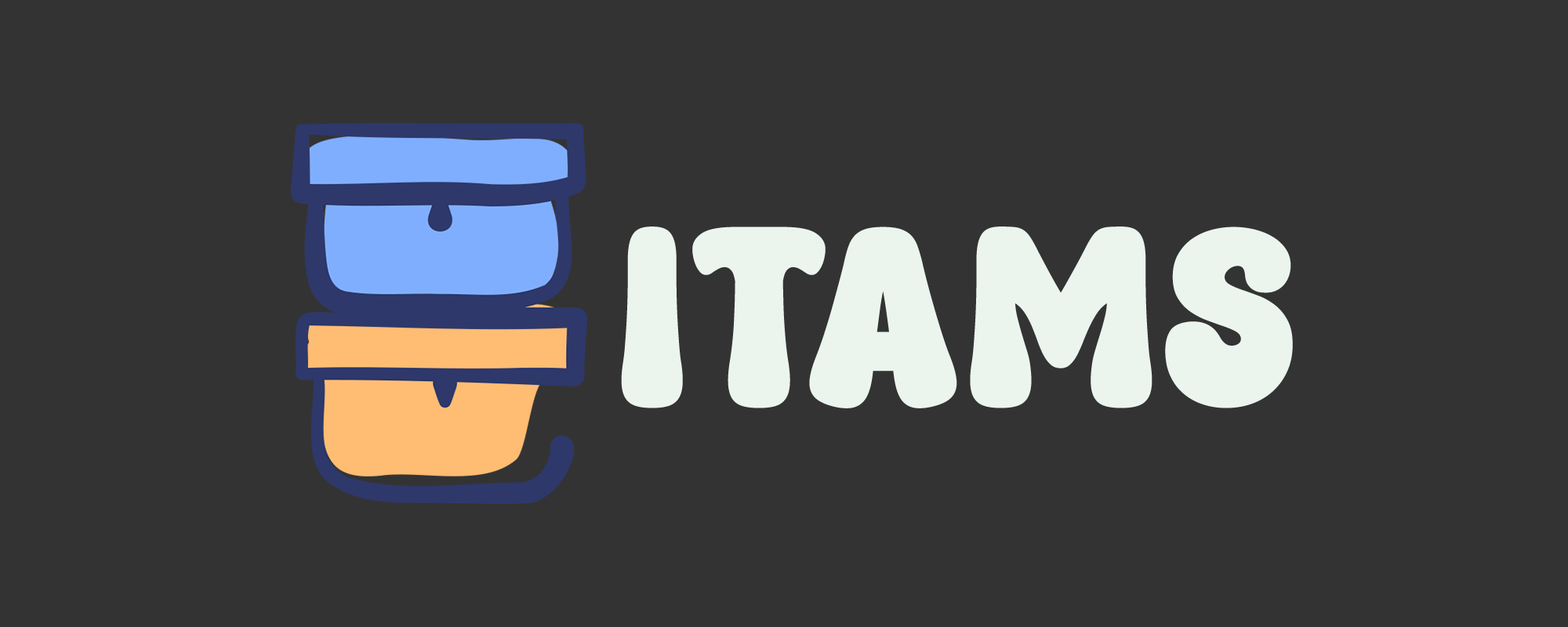
<style>
.page{position:relative;width:1568px;height:627px;background:#333333}
.page>*{position:absolute;margin:0}
.t1{font:245.6px "MilkywayDEMO";letter-spacing:0.04em;color:#ebf5ee}
</style>
<div class="page">
<p class="t1" style="left:621px;top:227px;width:672px;height:181px">ITAMS</p>
</div>
